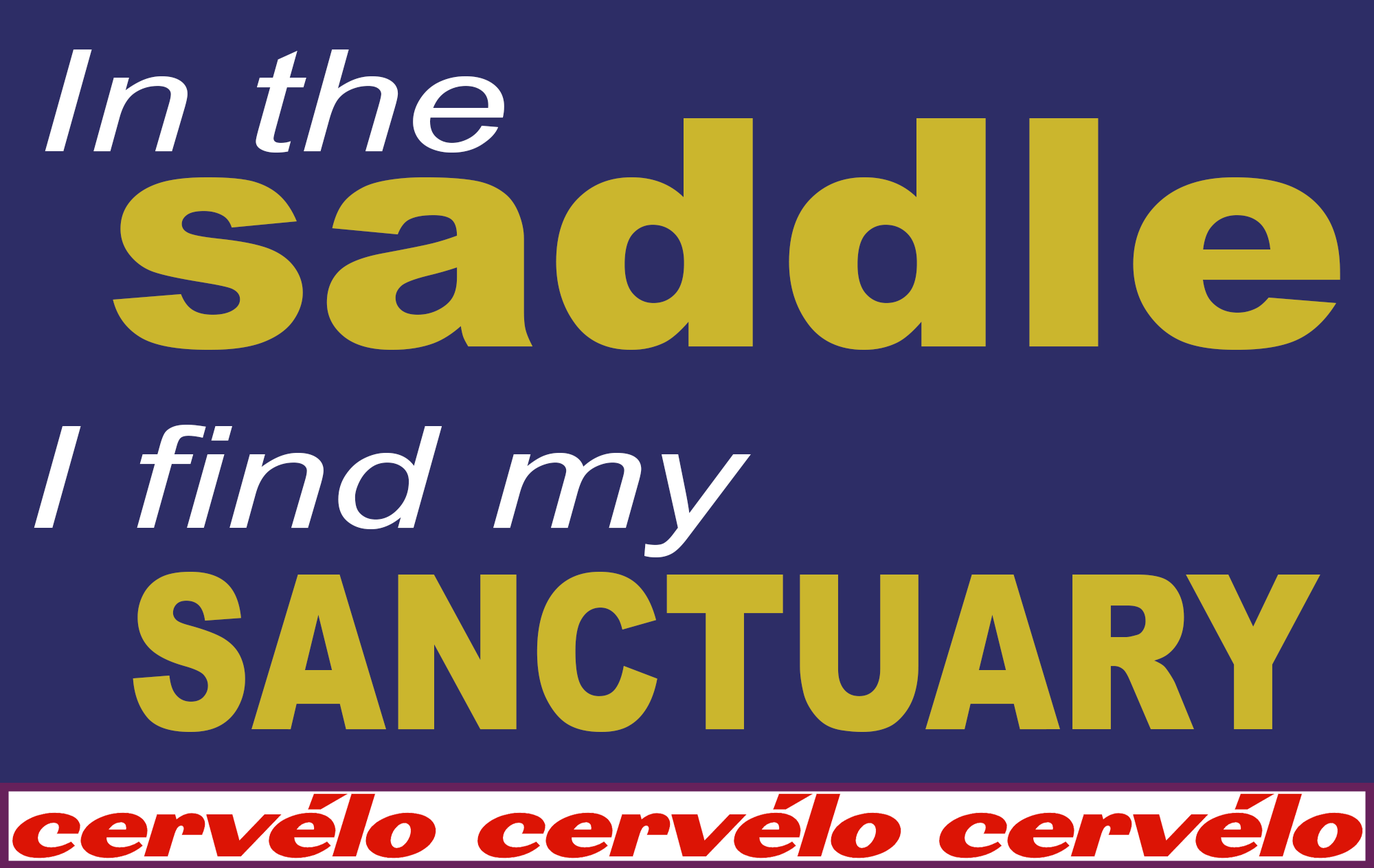
<style>
.page{position:relative;width:1374px;height:868px;background:#2d2d66}
.page>*{position:absolute;margin:0}
.t1{font:142.3px "Arial-ItalicMT";color:#ffffff;scale:1.33 1}
.t2{font:318.6px "Arial-Black";color:#cbb62d;scale:1.08 1}
.t3{font:215.8px "Arial-Black";color:#cbb62d;scale:0.8 1}
</style>
<div class="page">
<p class="t1" style="left:45px;top:49px;width:459px;height:104px">In the</p>
<p class="t2" style="left:113px;top:118px;width:1227px;height:232px">saddle</p>
<p class="t1" style="left:34px;top:425px;width:717px;height:132px">I find my</p>
<p class="t3" style="left:133px;top:572px;width:1188px;height:160px">SANCTUARY</p>
</div>
